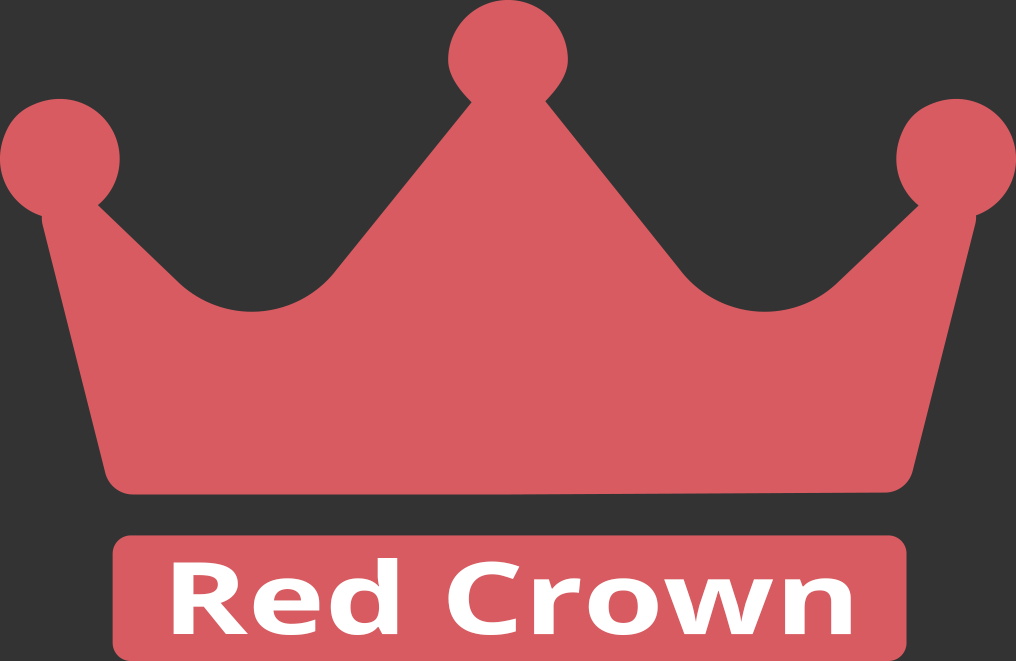
<style>
.page{position:relative;width:1016px;height:661px;background:#d85b61}
.page>*{position:absolute;margin:0}
.t1{font:100px "OpenSans-Bold";color:#ffffff;scale:1.3 1}
</style>
<div class="page">
<p class="t1" style="left:173px;top:558px;width:678px;height:77px">Red Crown</p>
</div>
